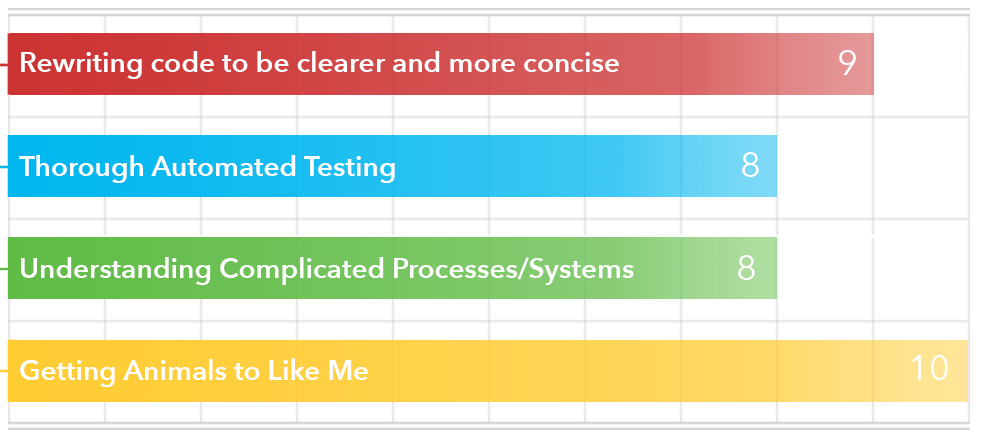
<style>
.page{position:relative;width:982px;height:442px;background:#ffffff}
.page>*{position:absolute;margin:0}
.t1{font:28px "AvenirNext-DemiBold";color:#ffffff}
.t2{font:36px "AvenirNext-Regular";color:#ffffff}
</style>
<div class="page">
<p class="t1" style="left:21px;top:51px;width:598px;height:28px">Rewriting code to be clearer and more concise</p>
<p class="t2" style="left:839px;top:50px;width:17px;height:25px">9</p>
<p class="t1" style="left:19px;top:155px;width:376px;height:28px">Thorough Automated Testing</p>
<p class="t2" style="left:742px;top:152px;width:17px;height:25px">8</p>
<p class="t1" style="left:21px;top:257px;width:613px;height:28px">Understanding Complicated Processes/Systems</p>
<p class="t2" style="left:738px;top:255px;width:17px;height:25px">8</p>
<p class="t1" style="left:20px;top:358px;width:348px;height:29px">Getting Animals to Like Me</p>
<p class="t2" style="left:912px;top:355px;width:36px;height:25px">10</p>
</div>
